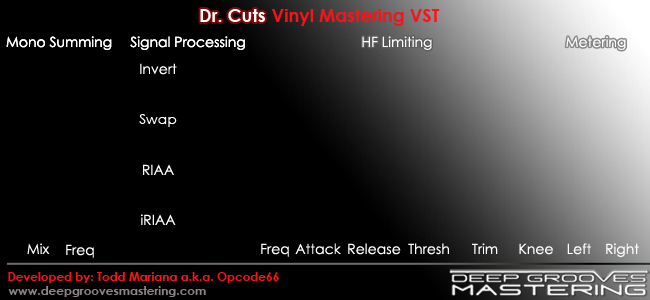
<style>
.page{position:relative;width:650px;height:300px;background:#000000}
.page>*{position:absolute;margin:0}
.t1{font:18px "CenturyGothic-Bold";color:#ffffff}
.t2{font:18px "CenturyGothic-Bold";color:#ff1016}
.t3{font:14px "CenturyGothic";color:#ffffff}
.t4{font:12px "CenturyGothic-Bold";color:#ff1016}
.t5{font:12px "CenturyGothic-Bold";color:#8b8384}
</style>
<div class="page">
<p class="t1" style="left:200px;top:9px;width:65px;height:13px">Dr. Cuts</p>
<p class="t2" style="left:272px;top:9px;width:168px;height:17px">Vinyl Mastering VST</p>
<p class="t3" style="left:6px;top:36px;width:106px;height:14px">Mono Summing</p>
<p class="t3" style="left:6px;top:36px;width:106px;height:14px">Mono Summing</p>
<p class="t3" style="left:130px;top:36px;width:115px;height:14px">Signal Processing</p>
<p class="t3" style="left:130px;top:36px;width:115px;height:14px">Signal Processing</p>
<p class="t3" style="left:362px;top:36px;width:70px;height:14px">HF Limiting</p>
<p class="t3" style="left:362px;top:36px;width:70px;height:14px">HF Limiting</p>
<p class="t3" style="left:566px;top:36px;width:60px;height:14px">Metering</p>
<p class="t3" style="left:566px;top:36px;width:60px;height:14px">Metering</p>
<p class="t3" style="left:140px;top:63px;width:37px;height:12px">Invert</p>
<p class="t3" style="left:139px;top:114px;width:38px;height:13px">Swap</p>
<p class="t3" style="left:143px;top:164px;width:31px;height:11px">RIAA</p>
<p class="t3" style="left:141px;top:214px;width:35px;height:11px">iRIAA</p>
<p class="t3" style="left:27px;top:243px;width:23px;height:11px">Mix</p>
<p class="t3" style="left:66px;top:244px;width:28px;height:14px">Freq</p>
<p class="t3" style="left:261px;top:243px;width:28px;height:14px">Freq</p>
<p class="t3" style="left:295px;top:243px;width:46px;height:12px">Attack</p>
<p class="t3" style="left:348px;top:243px;width:53px;height:12px">Release</p>
<p class="t3" style="left:408px;top:243px;width:41px;height:12px">Thresh</p>
<p class="t3" style="left:472px;top:243px;width:26px;height:11px">Trim</p>
<p class="t3" style="left:519px;top:243px;width:34px;height:12px">Knee</p>
<p class="t3" style="left:567px;top:243px;width:24px;height:12px">Left</p>
<p class="t3" style="left:606px;top:243px;width:33px;height:14px">Right</p>
<p class="t4" style="left:8px;top:272px;width:271px;height:11px">Developed by: Todd Mariana a.k.a. Opcode66</p>
<p class="t5" style="left:8px;top:286px;width:198px;height:11px">www.deepgroovesmastering.com</p>
</div>
